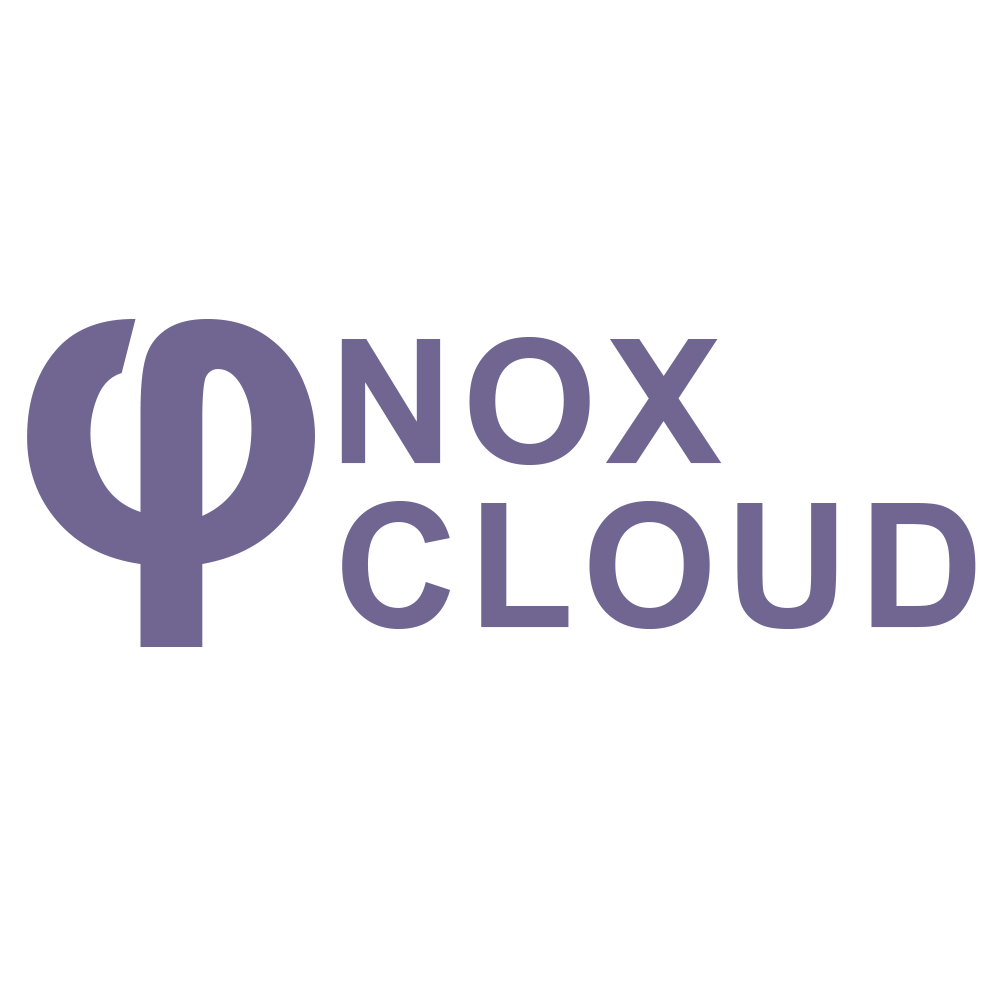
<style>
.page{position:relative;width:1000px;height:1000px;background:#ffffff}
.page>*{position:absolute;margin:0}
.t1{font:450px "Arial-BoldMT";letter-spacing:0.05em;color:#716691}
.t2{font:173px "Arial-BoldMT";letter-spacing:0.05em;color:#716691}
</style>
<div class="page">
<p class="t1" style="left:27px;top:319px;width:288px;height:328px">φ</p>
<p class="t2" style="left:341px;top:337px;width:381px;height:128px">NOX</p>
<p class="t2" style="left:342px;top:501px;width:634px;height:128px">CLOUD</p>
</div>
